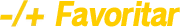
<style>
.page{position:relative;width:180px;height:28px;background:#ffffff}
.page>*{position:absolute;margin:0}
.t1{font:32px "RodinPro-EB";letter-spacing:-0.051em;color:#fecd00;font-style:italic;scale:0.9 1}
</style>
<div class="page">
<p class="t1" style="left:55px;top:1px;width:125px;height:26px">Favoritar</p>
</div>
